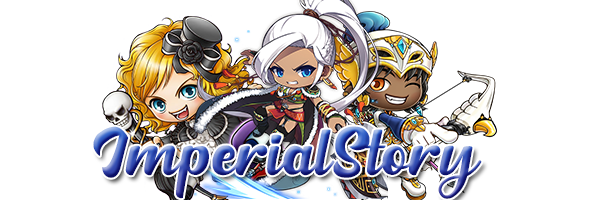
<style>
.page{position:relative;width:598px;height:200px;background:#ffffff}
.page>*{position:absolute;margin:0}
.t1{font:75px "PodcastRegular"}
</style>
<div class="page">
<p class="t1" style="left:93px;top:126px;width:389px;height:73px">ImperialStory</p>
</div>
